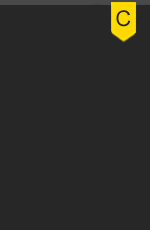
<style>
.page{position:relative;width:150px;height:230px;background:#272727}
.page>*{position:absolute;margin:0}
.t1{font:30px "Utsaah";color:#272727}
</style>
<div class="page">
<p class="t1" style="left:116px;top:10px;width:15px;height:17px">C</p>
</div>
